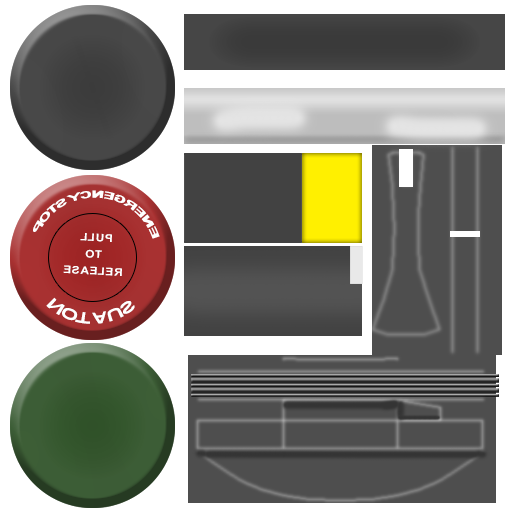
<style>
.page{position:relative;width:512px;height:512px;background:#ffffff}
.page>*{position:absolute;margin:0}
.t1{font:10.3px "Arial-BoldMT";letter-spacing:-0.065em;color:#ffffff;text-transform:uppercase;scale:1.15 1}
.t2{font:10.4px/16.7px "Arial-BoldMT";letter-spacing:0.04em;color:#ffffff;text-transform:uppercase;scale:1.13 1}
.t3{font:14.8px "Arial-BoldMT";letter-spacing:-0.065em;color:#ffffff;text-transform:uppercase;scale:1.16 1}
</style>
<div class="page">
<p class="t1" style="left:33px;top:190px;width:127px;height:49px;rotate:179deg">ENERGENCY STOP</p>
<p class="t2" style="left:63px;top:233px;width:59px;height:43px;text-align:center;rotate:-177deg">PULL <br>to<br>release</p>
<p class="t3" style="left:46px;top:297px;width:89px;height:27px;rotate:-1deg">NOT AUS</p>
</div>
